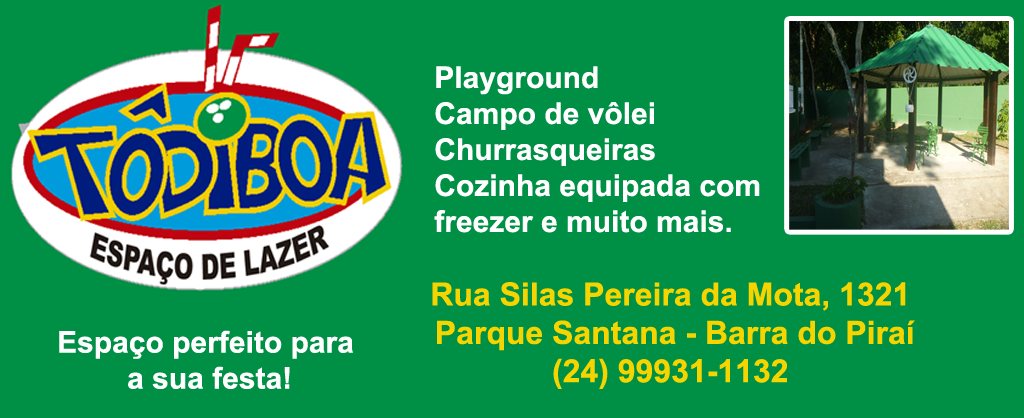
<style>
.page{position:relative;width:1024px;height:418px;background:#009045}
.page>*{position:absolute;margin:0}
.t1{font:30px "Arial-BoldMT";color:#ffffff}
.t2{font:32px "Arial-BoldMT";color:#f6d400}
</style>
<div class="page">
<p class="t1" style="left:434px;top:66px;width:326px;height:167px">Playground<br>Campo de vôlei<br>Churrasqueiras<br>Cozinha equipada com <br>freezer e muito mais.</p>
<p class="t2" style="left:432px;top:282px;width:483px;height:107px;text-align:center">Rua Silas Pereira da Mota, 1321<br> Parque Santana - Barra do Piraí<br>(24) 99931-1132</p>
<p class="t1" style="left:59px;top:330px;width:294px;height:59px;text-align:center">Espaço perfeito para<br> a sua festa!</p>
</div>
